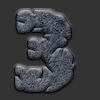
<style>
.page{position:relative;width:100px;height:100px;background:#333333}
.page>*{position:absolute;margin:0}
.t1{font:100px "JFRockSolid"}
</style>
<div class="page">
<p class="t1" style="left:15px;top:10px;width:60px;height:82px">3</p>
</div>
